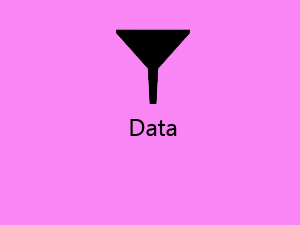
<style>
.page{position:relative;width:300px;height:225px;background:#fa85f4}
.page>*{position:absolute;margin:0}
.t1{font:24px "SegoeUI";color:#000000}
</style>
<div class="page">
<p class="t1" style="left:130px;top:119px;width:47px;height:17px">Data</p>
</div>
